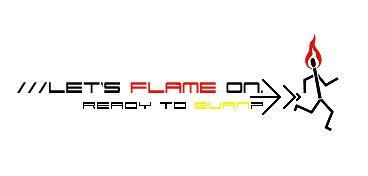
<style>
.page{position:relative;width:368px;height:176px;background:#ffffff}
.page>*{position:absolute;margin:0}
.t1{font:22px "911Porscha";color:#000000;scale:0.8 1}
.t2{font:22px "911Porscha";color:#de1305;scale:0.8 1}
.t3{font:14px "911Porscha";color:#000000}
.t4{font:14px "911Porscha";color:#fff200}
</style>
<div class="page">
<p class="t1" style="left:17px;top:82px;width:246px;height:11px">///Let's <span class="t2">Flame</span> On.</p>
<p class="t3" style="left:83px;top:102px;width:180px;height:7px">Ready to <span class="t4">BURN</span>?</p>
</div>
